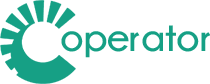
<style>
.page{position:relative;width:210px;height:84px;background:#ffffff}
.page>*{position:absolute;margin:0}
.t1{font:41px "Champagne&Limousines-Bold";color:#16a085}
</style>
<div class="page">
<p class="t1" style="left:61px;top:25px;width:150px;height:33px">operator</p>
</div>
